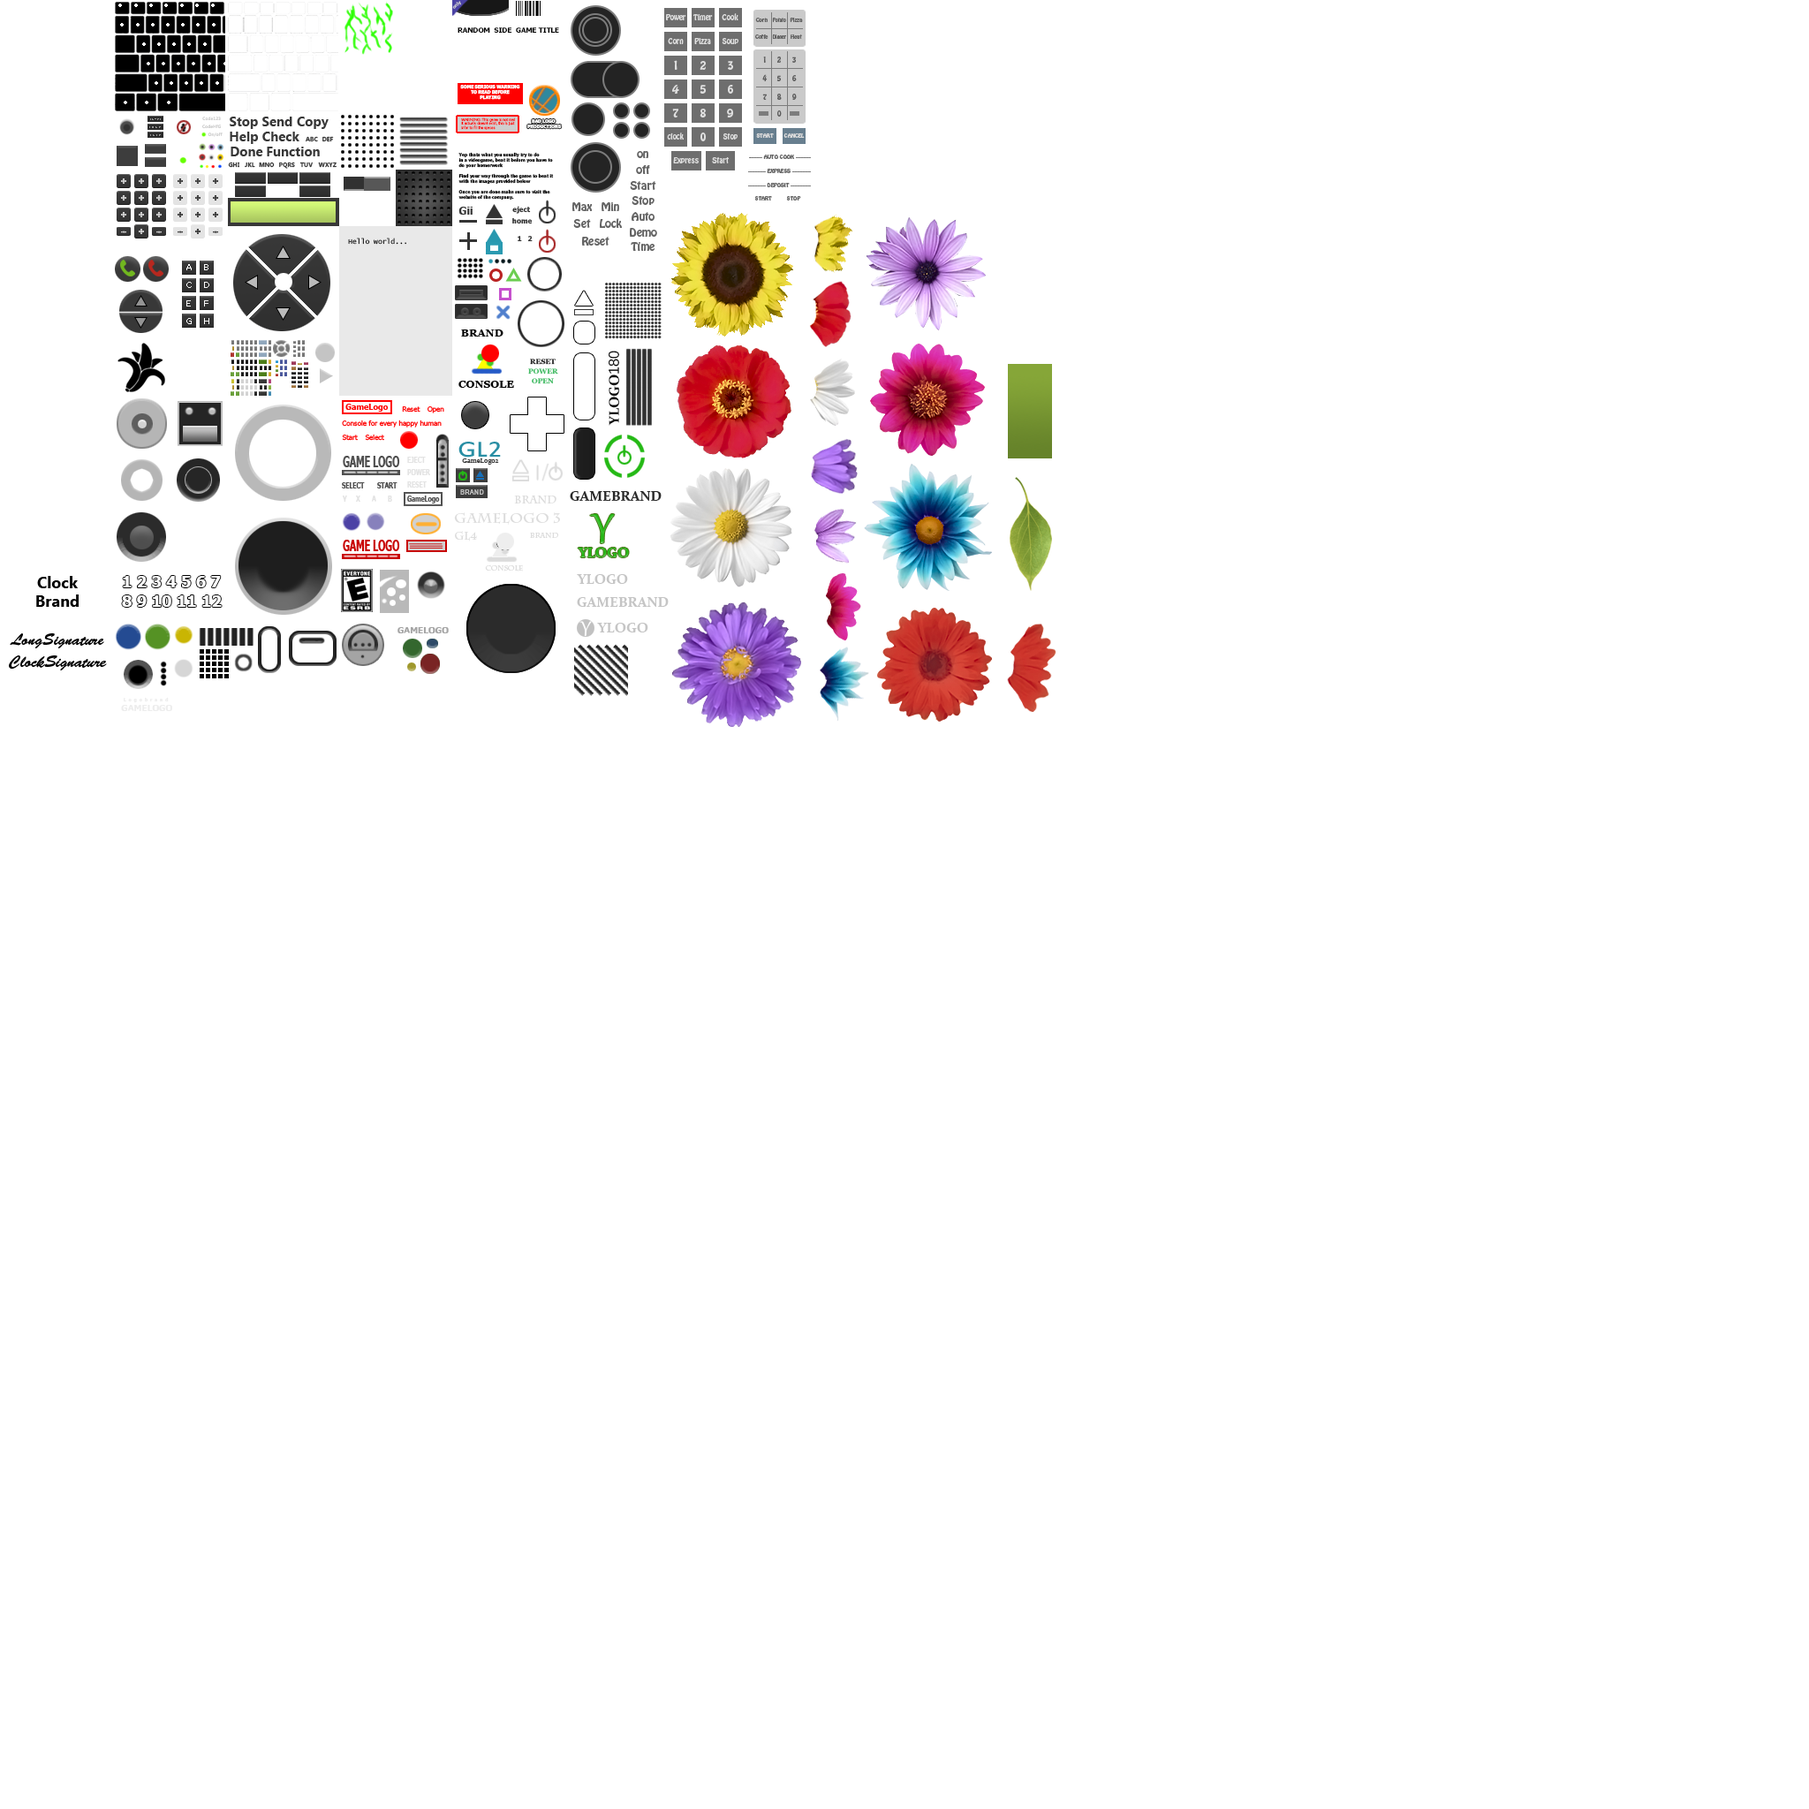
<style>
.page{position:relative;width:1809px;height:1809px;background:#ffffff}
.page>*{position:absolute;margin:0}
.t1{font:4.4px "Tahoma-Bold";color:#d6d6d6}
.t2{font:7.1px "Tahoma-Bold";color:#000000}
.t3{font:4.4px "Tahoma-Bold";color:#ffffff}
.t4{font:4.4px "MicrosoftTaiLe-Bold";color:#d0d0d0}
.t5{font:13.2px "MicrosoftTaiLe-Bold";color:#373737}
.t6{font:3.5px "Tahoma";color:#ff0000}
.t7{font:3.5px "Tahoma-Bold";color:#ff0000}
.t8{font:6.2px "MicrosoftTaiLe-Bold";color:#373737}
.t9{font:5.3px "HoboStd";color:#dbdbdb}
.t10{font:4.4px "Tahoma-Bold";color:#000000}
.t11{font:10.6px "HoboStd";color:#646464}
.t12{font:5.3px "HoboStd";color:#646464}
.t13{font:10.6px "Tahoma-Bold";color:#333333}
.t14{font:7.1px "Tahoma-Bold";color:#333333}
.t15{font:7.1px "LucidaConsole";color:#000000}
.t16{font:10.6px "Vani-Bold";color:#000000}
.t17{font:13.8px "Constantia-Bold";color:#000000}
.t18{font:13.8px "Kalinga";color:#000000}
.t19{font:7.1px "Vani-Bold";color:#252525}
.t20{font:7.1px "Vani-Bold";color:#43bb65}
.t21{font:7.9px "Tahoma-Bold";color:#ff0000}
.t22{font:7.1px "Tahoma";color:#ff0000}
.t23{font:23.4px "EstrangeloEdessa";color:#298ea4;scale:1.17 1}
.t24{font:15.5px "Tahoma-Bold";color:#4f4f4f;scale:0.6 1}
.t25{font:9px "Tahoma-Bold";color:#e3e3e3;scale:0.67 1}
.t26{font:7.1px "Constantia";color:#3d3d3d}
.t27{font:9px "Tahoma-Bold";color:#4f4f4f;scale:0.67 1}
.t28{font:9px "Tahoma-Bold";color:#515151;scale:0.67 1}
.t29{font:6.6px "Kartika-Bold";color:#c1c1c1;scale:0.96 1}
.t30{font:10.6px "CharlemagneStd-Bold";color:#dcdcdc}
.t31{font:14.1px "Constantia-Bold";color:#282828}
.t32{font:13.7px "CharlemagneStd-Bold";color:#dcdcdc}
.t33{font:53px "Gabriola";color:#24b915}
.t34{font:7.1px "CharlemagneStd-Bold";color:#dcdcdc}
.t35{font:14.1px "Constantia-Bold";color:#24b915}
.t36{font:15.9px "MicrosoftTaiLe-Bold";color:#000000}
.t37{font:14.1px "Constantia-Bold";color:#c5c5c5}
.t38{font:8.8px "Tahoma-Bold";color:#a4a4a4}
.t39{font:15.9px "BrushScriptStd";color:#000000}
.t40{font:4.4px "Tahoma-Bold";color:#ededed}
.t41{font:8.8px "Tahoma-Bold";color:#ededed}
</style>
<div class="page">
<p class="t1" style="left:452px;top:1px;width:9px;height:8px;rotate:-43deg">only</p>
<p class="t2" style="left:457px;top:27px;width:102px;height:7px">RANDOM  SIDE  GAME TITLE</p>
<p class="t3" style="left:460px;top:85px;width:60px;height:15px;text-align:center">SOME SERIOUS WARNING<br>TO READ BEFORE<br>PLAYING</p>
<p class="t4" style="left:202px;top:117px;width:19px;height:4px">Code123</p>
<p class="t4" style="left:202px;top:125px;width:19px;height:4px">CodeHfG</p>
<p class="t5" style="left:230px;top:117px;width:28px;height:12px">Stop</p>
<p class="t5" style="left:262px;top:117px;width:30px;height:9px">Send</p>
<p class="t5" style="left:297px;top:117px;width:32px;height:12px">Copy</p>
<p class="t6" style="left:461px;top:117px;width:54px;height:13px"><span class="t7">WARNING: </span>This game is not real<br>it actually doesnt exist, this is just<br>infor to fill the spaces</p>
<p class="t3" style="left:527px;top:119px;width:35px;height:10px;text-align:center">BAD LOGO <br>PRODUCTIONS</p>
<p class="t4" style="left:208px;top:132px;width:15px;height:5px">On/off</p>
<p class="t5" style="left:230px;top:132px;width:28px;height:12px">Help</p>
<p class="t5" style="left:262px;top:132px;width:37px;height:9px">Check</p>
<p class="t8" style="left:306px;top:136px;width:12px;height:6px">ABC</p>
<p class="t8" style="left:322px;top:136px;width:12px;height:6px">DEF</p>
<p class="t9" style="left:756px;top:133px;width:18px;height:5px">START</p>
<p class="t9" style="left:783px;top:133px;width:22px;height:5px">CANCEL</p>
<p class="t5" style="left:230px;top:147px;width:33px;height:9px">Done</p>
<p class="t5" style="left:267px;top:147px;width:53px;height:9px">Function</p>
<p class="t8" style="left:228px;top:162px;width:12px;height:6px">GHI</p>
<p class="t8" style="left:245px;top:162px;width:10px;height:6px">JKL</p>
<p class="t8" style="left:259px;top:162px;width:16px;height:6px">MNO</p>
<p class="t8" style="left:279px;top:162px;width:16px;height:7px">PQRS</p>
<p class="t8" style="left:299px;top:162px;width:14px;height:6px">TUV</p>
<p class="t8" style="left:318px;top:162px;width:18px;height:6px">WXYZ</p>
<p class="t10" style="left:458px;top:152px;width:96px;height:48px">Yep thats what you usually try to do<br>in a videogame, beat it before you have to<br>do your homerwork<br><br>Find your way through the game to beat it<br>with the images provided below<br><br>Once you are done make sure to visit the<br>website of the company.</p>
<p class="t11" style="left:637px;top:151px;width:11px;height:7px">on</p>
<p class="t12" style="left:749px;top:155px;width:62px;height:4px">---------- AUTO COOK -----------</p>
<p class="t11" style="left:636px;top:165px;width:14px;height:9px">off</p>
<p class="t12" style="left:748px;top:169px;width:63px;height:4px">------------- EXPRESS --------------</p>
<p class="t11" style="left:630px;top:181px;width:26px;height:9px">Start</p>
<p class="t12" style="left:748px;top:183px;width:63px;height:4px">------------- DEPOSIT ---------------</p>
<p class="t11" style="left:631px;top:196px;width:23px;height:9px">Stop</p>
<p class="t12" style="left:754px;top:196px;width:47px;height:4px">START STOP</p>
<p class="t13" style="left:458px;top:207px;width:14px;height:8px">Gii</p>
<p class="t14" style="left:512px;top:206px;width:19px;height:8px">eject</p>
<p class="t11" style="left:572px;top:202px;width:21px;height:9px">Max</p>
<p class="t11" style="left:601px;top:202px;width:18px;height:9px">Min</p>
<p class="t14" style="left:512px;top:218px;width:21px;height:6px">home</p>
<p class="t11" style="left:573px;top:219px;width:18px;height:9px">Set</p>
<p class="t11" style="left:600px;top:218px;width:22px;height:10px">Lock</p>
<p class="t11" style="left:631px;top:212px;width:23px;height:9px">Auto</p>
<p class="t11" style="left:630px;top:228px;width:27px;height:9px">Demo</p>
<p class="t15" style="left:348px;top:238px;width:58px;height:7px">Hello world...</p>
<p class="t14" style="left:517px;top:236px;width:16px;height:6px">1   2</p>
<p class="t11" style="left:582px;top:237px;width:27px;height:9px">Reset</p>
<p class="t11" style="left:631px;top:242px;width:23px;height:9px">Time</p>
<p class="t16" style="left:461px;top:329px;width:42px;height:7px">BRAND</p>
<p class="t17" style="left:608px;top:351px;width:11px;height:75px;rotate:-90deg">YLOGO<span class="t18">180</span></p>
<p class="t19" style="left:530px;top:359px;width:25px;height:6px">RESET</p>
<p class="t20" style="left:528px;top:368px;width:30px;height:6px">POWER</p>
<p class="t20" style="left:532px;top:378px;width:22px;height:6px">OPEN</p>
<p class="t16" style="left:458px;top:381px;width:56px;height:7px">CONSOLE</p>
<p class="t21" style="left:345px;top:404px;width:44px;height:8px">GameLogo</p>
<p class="t22" style="left:402px;top:406px;width:18px;height:6px">Reset</p>
<p class="t22" style="left:427px;top:406px;width:17px;height:7px">Open</p>
<p class="t22" style="left:342px;top:419px;width:100px;height:8px">Console for every happy human</p>
<p class="t22" style="left:342px;top:434px;width:16px;height:7px">Start</p>
<p class="t22" style="left:365px;top:434px;width:19px;height:7px">Select</p>
<p class="t23" style="left:458px;top:442px;width:43px;height:15px">GL2</p>
<p class="t24" style="left:343px;top:456px;width:57px;height:11px">GAME LOGO</p>
<p class="t25" style="left:407px;top:457px;width:19px;height:6px">EJECT</p>
<p class="t26" style="left:462px;top:458px;width:37px;height:7px">GameLogo2</p>
<p class="t25" style="left:407px;top:469px;width:23px;height:6px">POWER</p>
<p class="t27" style="left:342px;top:482px;width:23px;height:6px">SELECT</p>
<p class="t27" style="left:377px;top:482px;width:20px;height:6px">START</p>
<p class="t25" style="left:407px;top:481px;width:20px;height:6px">RESET</p>
<p class="t25" style="left:342px;top:495px;width:5px;height:7px">Y</p>
<p class="t25" style="left:356px;top:495px;width:4px;height:7px">X</p>
<p class="t25" style="left:371px;top:495px;width:5px;height:7px">A</p>
<p class="t25" style="left:388px;top:495px;width:4px;height:7px">B</p>
<p class="t28" style="left:407px;top:495px;width:33px;height:8px">GameLogo</p>
<p class="t29" style="left:460px;top:489px;width:24px;height:6px">BRAND</p>
<p class="t30" style="left:514px;top:495px;width:42px;height:9px">BrAND</p>
<p class="t31" style="left:570px;top:491px;width:91px;height:10px">GAMEBRAND</p>
<p class="t32" style="left:454px;top:512px;width:106px;height:13px">GameLogo 3</p>
<p class="t33" style="left:590px;top:514px;width:25px;height:29px">Y</p>
<p class="t30" style="left:455px;top:531px;width:22px;height:10px">GL4</p>
<p class="t34" style="left:530px;top:533px;width:28px;height:6px">BRAND</p>
<p class="t35" style="left:578px;top:548px;width:51px;height:9px">YLOGO</p>
<p class="t34" style="left:485px;top:564px;width:38px;height:7px">Console</p>
<p class="t36" style="left:36px;top:576px;width:43px;height:31px;text-align:center">Clock<br>Brand</p>
<p class="t37" style="left:577px;top:574px;width:51px;height:10px">YLOGO</p>
<p class="t37" style="left:577px;top:597px;width:92px;height:10px">GAMEBRAND</p>
<p class="t38" style="left:397px;top:627px;width:52px;height:6px">GAMELOGO</p>
<p class="t37" style="left:597px;top:623px;width:51px;height:9px">YLOGO</p>
<p class="t39" style="left:10px;top:633px;width:94px;height:15px">LongSignature</p>
<p class="t39" style="left:9px;top:655px;width:98px;height:15px">ClockSignature</p>
<p class="t40" style="left:124px;top:697px;width:45px;height:6px">L  o  g  o  b  r  a  n  d</p>
<p class="t41" style="left:121px;top:705px;width:51px;height:6px">GAMELOGO</p>
</div>
